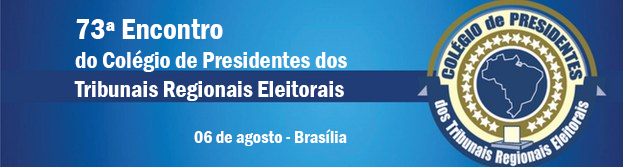
<style>
.page{position:relative;width:623px;height:167px}
.page>*{position:absolute;margin:0}
.t1{font:24px "FranklinGothic-DemiCond";color:#ffffff}
.t2{font:30px "FranklinGothic-DemiCond";color:#ffffff}
.t3{font:18px "FranklinGothic-DemiCond";color:#ffffff}
</style>
<div class="page">
<p class="t1" style="left:74px;top:19px;width:273px;height:82px"><span class="t2">73ª Encontro<br></span>do Colégio de Presidentes dos <br>Tribunais Regionais Eleitorais</p>
<p class="t3" style="left:194px;top:129px;width:153px;height:17px">06 de agosto - Brasília</p>
</div>
